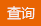
<style>
.page{position:relative;width:41px;height:26px;background:#e96402}
.page>*{position:absolute;margin:0}
.t1{font:14px "MicrosoftYaHei";color:#f6f6f6}
</style>
<div class="page">
<p class="t1" style="left:7px;top:6px;width:28px;height:14px">查询</p>
</div>
